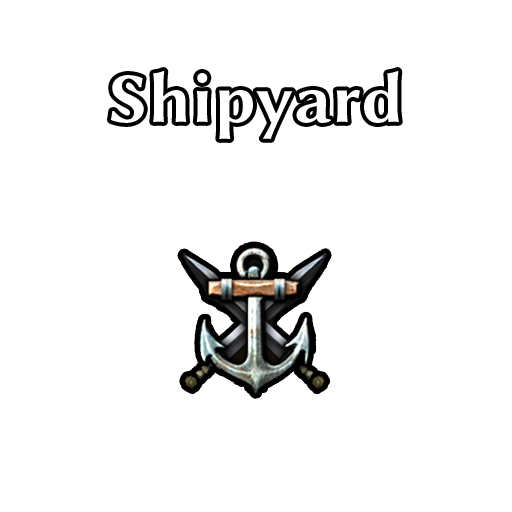
<style>
.page{position:relative;width:512px;height:512px;background:#ffffff}
.page>*{position:absolute;margin:0}
.t1{font:72px "LinBiolinumOB";color:#ffffff}
</style>
<div class="page">
<p class="t1" style="left:110px;top:71px;width:289px;height:68px">Shipyard</p>
</div>
